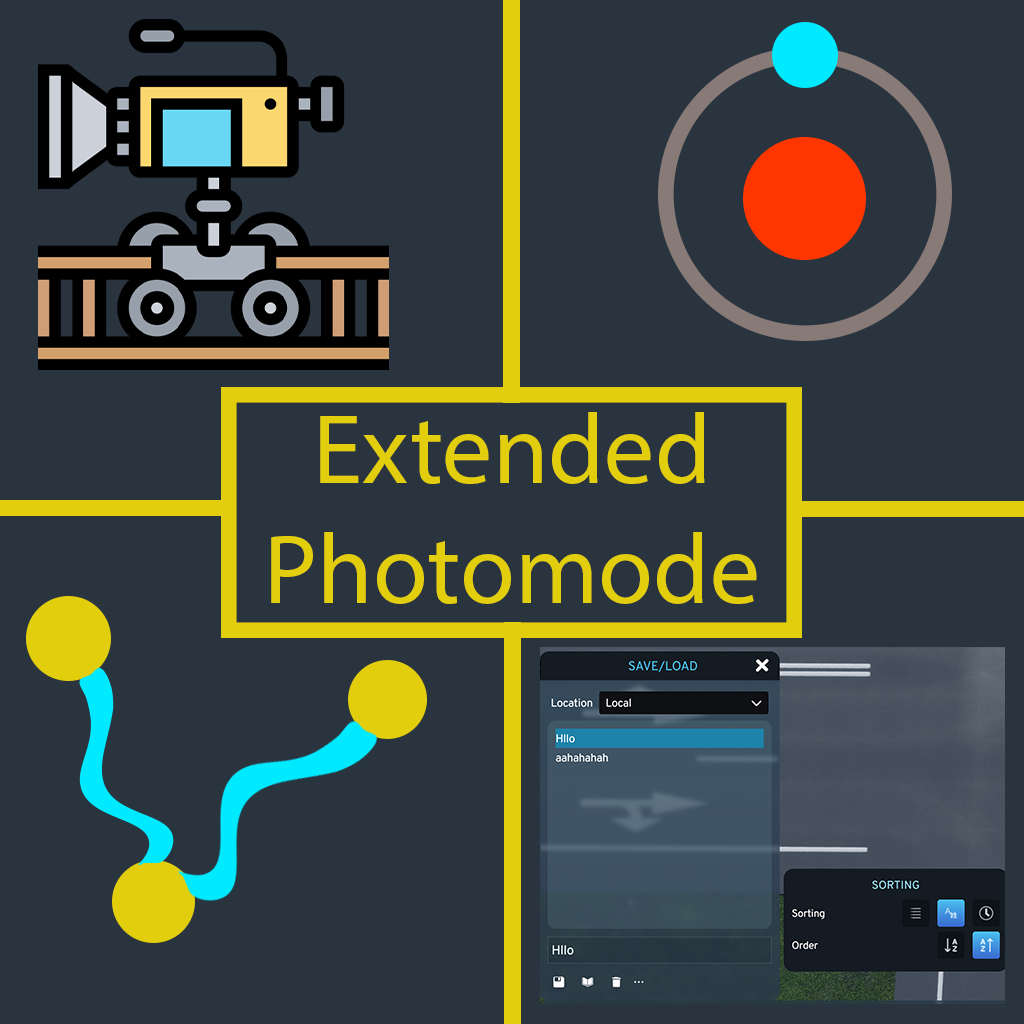
<style>
.page{position:relative;width:1024px;height:1024px;background:#2a343f}
.page>*{position:absolute;margin:0}
.t1{font:100px "MyriadPro-Regular";color:#e3ce0d}
</style>
<div class="page">
<p class="t1" style="left:271px;top:412px;width:486px;height:192px;text-align:center">Extended Photomode</p>
</div>
